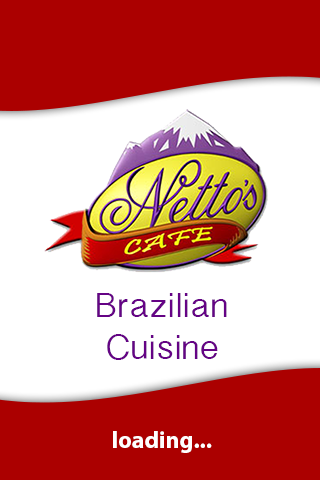
<style>
.page{position:relative;width:320px;height:480px;background:#ffffff}
.page>*{position:absolute;margin:0}
.t1{font:34.8px "BanglaSangamMN";color:#650385;scale:1.04 1}
.t2{font:23.9px "MyriadPro-Bold";color:#ffffff}
</style>
<div class="page">
<p class="t1" style="left:97px;top:293px;width:130px;height:67px;text-align:center">Brazilian<br>Cuisine</p>
<p class="t2" style="left:113px;top:431px;width:99px;height:22px">loading...</p>
</div>
